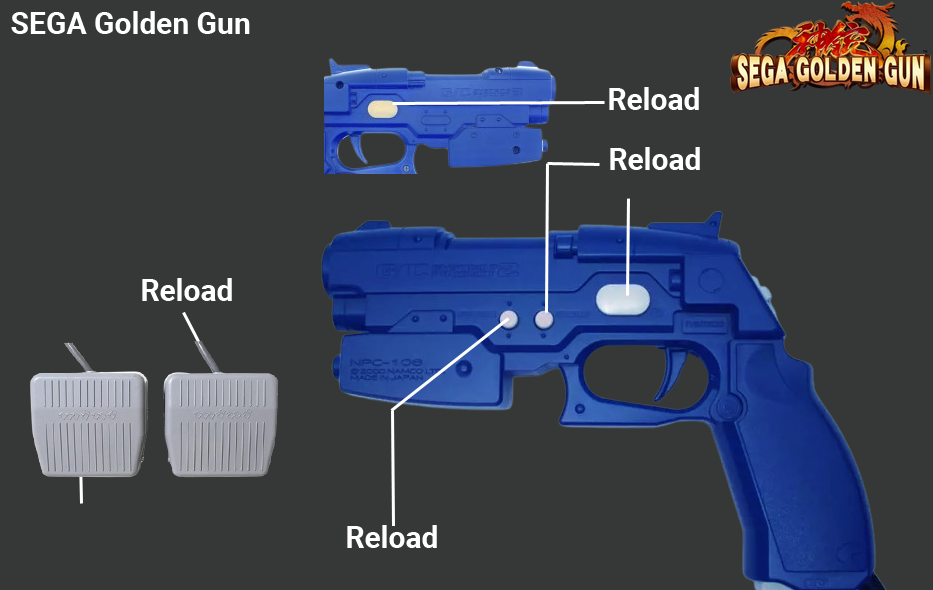
<style>
.page{position:relative;width:933px;height:590px;background:#363838}
.page>*{position:absolute;margin:0}
.t1{font:30px "Roboto-Bold";color:#ffffff}
</style>
<div class="page">
<p class="t1" style="left:11px;top:11px;width:239px;height:23px">SEGA Golden Gun</p>
<p class="t1" style="left:609px;top:87px;width:90px;height:23px">Reload</p>
<p class="t1" style="left:610px;top:147px;width:90px;height:23px">Reload</p>
<p class="t1" style="left:142px;top:278px;width:90px;height:23px">Reload</p>
<p class="t1" style="left:347px;top:525px;width:90px;height:23px">Reload</p>
</div>
